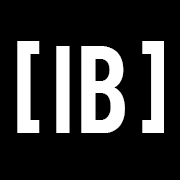
<style>
.page{position:relative;width:180px;height:180px;background:#000000}
.page>*{position:absolute;margin:0}
.t1{font:96px "Bebas";color:#ffffff}
</style>
<div class="page">
<p class="t1" style="left:17px;top:41px;width:147px;height:92px">[ IB ]</p>
</div>
